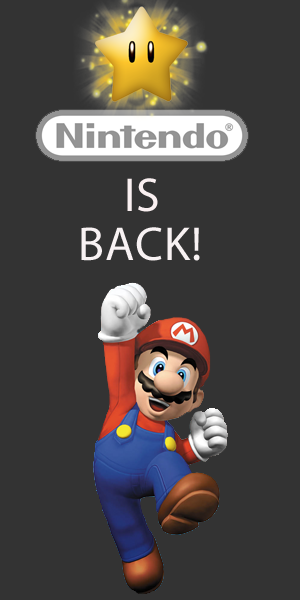
<style>
.page{position:relative;width:300px;height:600px;background:#333333}
.page>*{position:absolute;margin:0}
.t1{font:48px "MyriadPro-Regular";letter-spacing:0.02em;color:#faf0f1}
.t2{font:48px "MyriadPro-Regular";letter-spacing:0.02em;color:#f8f1f2}
</style>
<div class="page">
<p class="t1" style="left:127px;top:178px;width:31px;height:34px">IS</p>
<p class="t2" style="left:81px;top:227px;width:119px;height:34px">BACK!</p>
</div>
